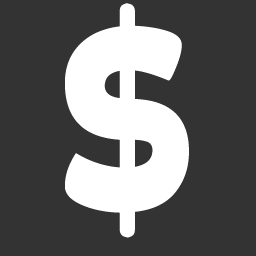
<style>
.page{position:relative;width:256px;height:256px;background:#333333}
.page>*{position:absolute;margin:0}
.t1{font:258.5px "LilitaOne";color:#ffffff;font-weight:bold}
</style>
<div class="page">
<p class="t1" style="left:65px;top:3px;width:124px;height:235px">$</p>
</div>
